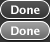
<style>
.page{position:relative;width:50px;height:42px}
.page>*{position:absolute;margin:0}
.t1{font:11.5px "LucidaGrande-Bold";letter-spacing:-0.025em;color:#ffffff}
</style>
<div class="page">
<p class="t1" style="left:11px;top:5px;width:29px;height:9px">Done</p>
<p class="t1" style="left:11px;top:26px;width:29px;height:9px">Done</p>
</div>
